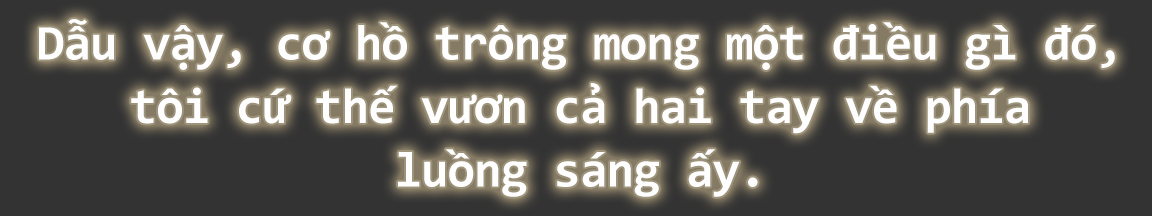
<style>
.page{position:relative;width:1152px;height:216px;background:#333333}
.page>*{position:absolute;margin:0}
.t1{font:50px/55.5px "Consolas-Bold";letter-spacing:-0.02em;color:#fefefe}
</style>
<div class="page">
<p class="t1" style="left:39px;top:19px;width:1076px;height:178px;text-align:center">Dẫu vậy, cơ hồ trông mong một điều gì đó, <br>tôi cứ thế vươn cả hai tay về phía<br>luồng sáng ấy.</p>
</div>
